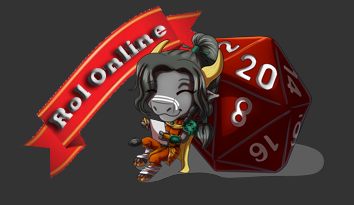
<style>
.page{position:relative;width:354px;height:205px;background:#333333}
.page>*{position:absolute;margin:0}
.t1{font:23px "Rockwell-ExtraBold"}
</style>
<div class="page">
<p class="t1" style="left:48px;top:25px;width:119px;height:106px;rotate:-42deg">Rol Online</p>
</div>
